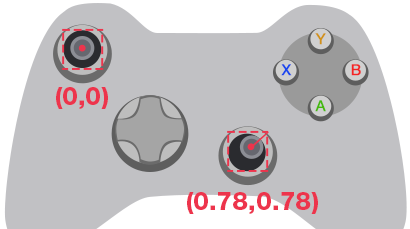
<style>
.page{position:relative;width:410px;height:229px;background:#c1c1c4}
.page>*{position:absolute;margin:0}
.t1{font:15px "HelveticaNeue";letter-spacing:0.06em;color:#d19218;font-weight:bold}
.t2{font:15px "HelveticaNeue";letter-spacing:0.06em;color:#1a47ed;font-weight:bold}
.t3{font:15px "HelveticaNeue";letter-spacing:0.06em;color:#f32424;font-weight:bold}
.t4{font:25px "HelveticaNeueCyr-Heavy";color:#ed344c}
.t5{font:15px "HelveticaNeue";letter-spacing:0.06em;color:#47ba0e;font-weight:bold}
</style>
<div class="page">
<p class="t1" style="left:315px;top:33px;width:11px;height:12px">Y</p>
<p class="t2" style="left:281px;top:64px;width:11px;height:12px">X</p>
<p class="t3" style="left:351px;top:64px;width:10px;height:12px">B</p>
<p class="t4" style="left:56px;top:87px;width:52px;height:22px">(0,0)</p>
<p class="t5" style="left:315px;top:100px;width:11px;height:12px">A</p>
<p class="t4" style="left:187px;top:192px;width:131px;height:22px">(0.78,0.78)</p>
</div>
